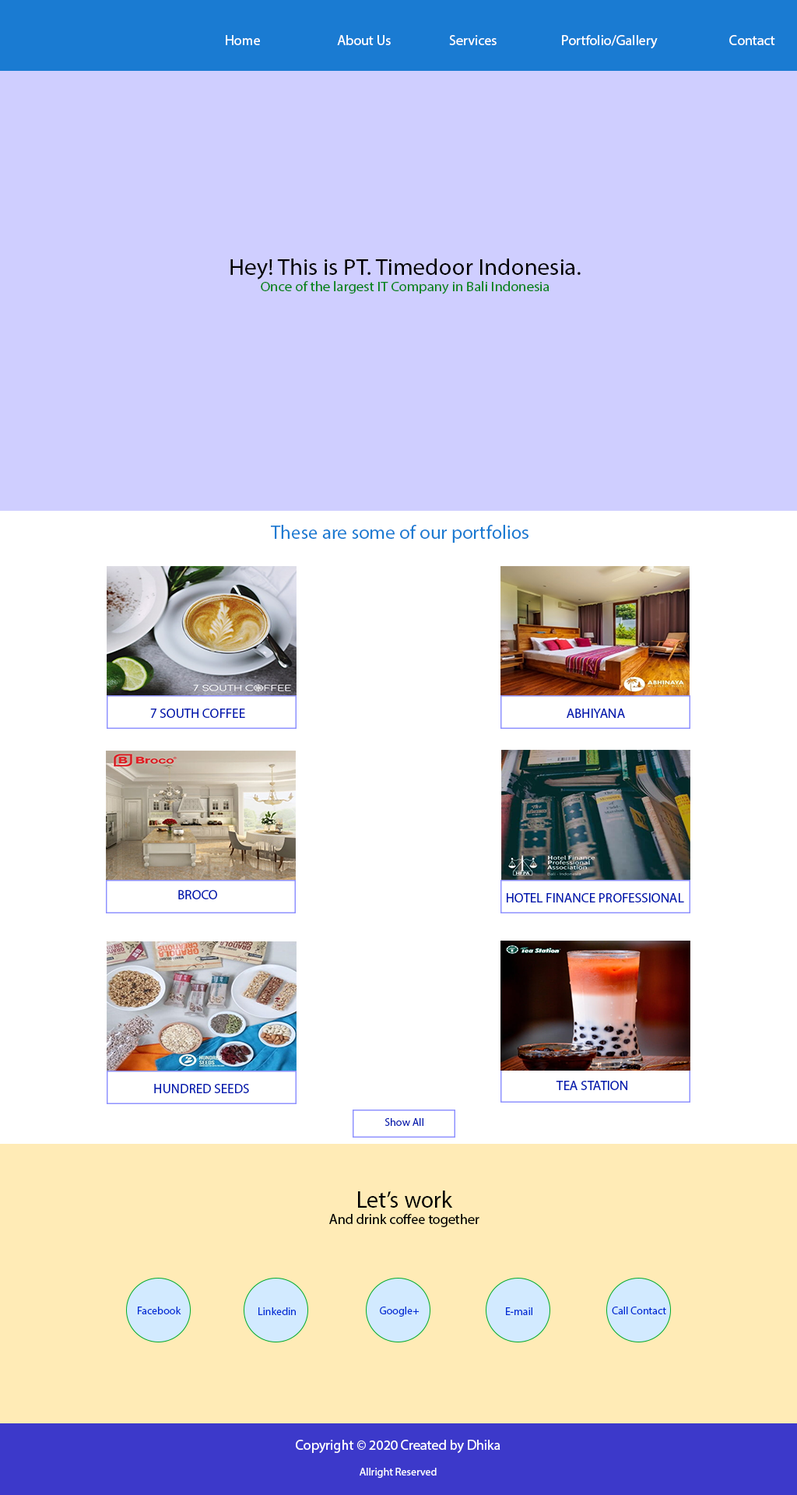
<style>
.page{position:relative;width:797px;height:1495px;background:#cfceff}
.page>*{position:absolute;margin:0}
.t1{font:14.3px "MyriadPro-Regular";color:#ffffff}
.t2{font:13.7px "MyriadPro-Regular";color:#008316;scale:1.06 1}
.t3{font:22.8px "MyriadPro-Regular";color:#000000;scale:1.06 1}
.t4{font:19.3px "MyriadPro-Regular";color:#1a7bd2}
.t5{font:13.8px "MyriadPro-Regular";color:#0019af;scale:0.97 1}
.t6{font:10.9px "MyriadPro-Regular";color:#0019af}
.t7{font:14px "MyriadPro-Regular";color:#000000}
.t8{font:23.4px "MyriadPro-Regular";color:#000000}
.t9{font:10.9px "MyriadPro-Regular";color:#002dd5}
.t10{font:14px "MyriadPro-Regular";color:#ffffff}
.t11{font:10.9px "MyriadPro-Regular";color:#ffffff}
</style>
<div class="page">
<p class="t1" style="left:226px;top:35px;width:550px;height:14px">Home   About Us   Services   Portfolio/Gallery   Contact</p>
<p class="t2" style="left:231px;top:259px;width:350px;height:35px;text-align:center"><span class="t3">Hey! This is PT. Timedoor Indonesia.<br></span>Once of the largest IT Company in Bali Indonesia</p>
<p class="t4" style="left:271px;top:525px;width:258px;height:18px">These are some of our portfolios</p>
<p class="t5" style="left:150px;top:709px;width:95px;height:9px">7 SOUTH COFFEE</p>
<p class="t5" style="left:567px;top:709px;width:58px;height:9px">ABHIYANA</p>
<p class="t5" style="left:178px;top:890px;width:39px;height:9px">BROCO</p>
<p class="t5" style="left:507px;top:893px;width:178px;height:10px">HOTEL FINANCE PROFESSIONAL</p>
<p class="t5" style="left:154px;top:1084px;width:95px;height:9px">HUNDRED SEEDS</p>
<p class="t5" style="left:556px;top:1081px;width:72px;height:9px">TEA STATION</p>
<p class="t6" style="left:385px;top:1118px;width:39px;height:8px">Show All</p>
<p class="t7" style="left:329px;top:1191px;width:151px;height:36px;text-align:center"><span class="t8">Let’s work<br></span>And drink coffee together</p>
<p class="t9" style="left:138px;top:1307px;width:43px;height:8px">Facebook</p>
<p class="t9" style="left:259px;top:1308px;width:37px;height:7px">Linkedin</p>
<p class="t9" style="left:380px;top:1307px;width:40px;height:10px">Google+</p>
<p class="t9" style="left:506px;top:1308px;width:27px;height:7px">E-mail</p>
<p class="t9" style="left:612px;top:1307px;width:55px;height:8px">Call Contact</p>
<p class="t10" style="left:296px;top:1440px;width:205px;height:38px;text-align:center">Copyright © 2020 Created by Dhika<br><span class="t11"><br>Allright Reserved</span></p>
</div>
